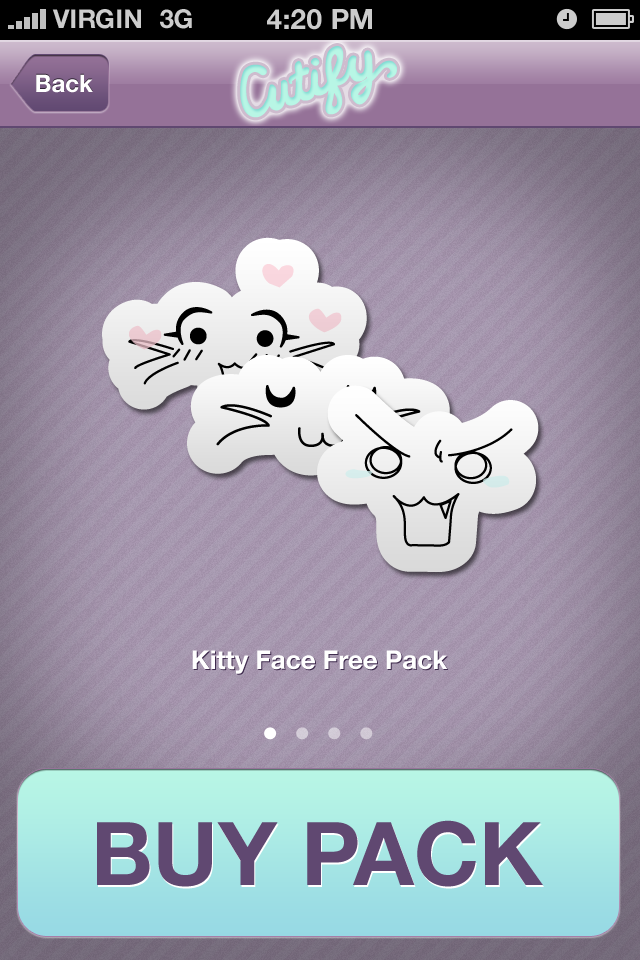
<style>
.page{position:relative;width:640px;height:960px}
.page>*{position:absolute;margin:0}
.t1{font:26px "HelveticaNeue-Bold";color:#cccccc;text-transform:uppercase}
.t2{font:28px "HelveticaNeue-Bold";color:#cccccc;text-transform:uppercase}
.t3{font:24px "HelveticaNeue-Bold";color:#ffffff}
.t4{font:26px "HelveticaNeue-Bold";color:#ffffff}
.t5{font:88px "HelveticaNeue-Bold";color:#604871}
</style>
<div class="page">
<p class="t1" style="left:52px;top:9px;width:89px;height:20px">VIRGIN</p>
<p class="t1" style="left:160px;top:9px;width:32px;height:20px">3G</p>
<p class="t2" style="left:267px;top:9px;width:105px;height:21px">4:20 pM</p>
<p class="t3" style="left:36px;top:74px;width:57px;height:19px">Back</p>
<p class="t4" style="left:192px;top:650px;width:256px;height:24px">Kitty Face Free Pack</p>
<p class="t5" style="left:97px;top:820px;width:446px;height:67px">BUY PACK</p>
</div>
